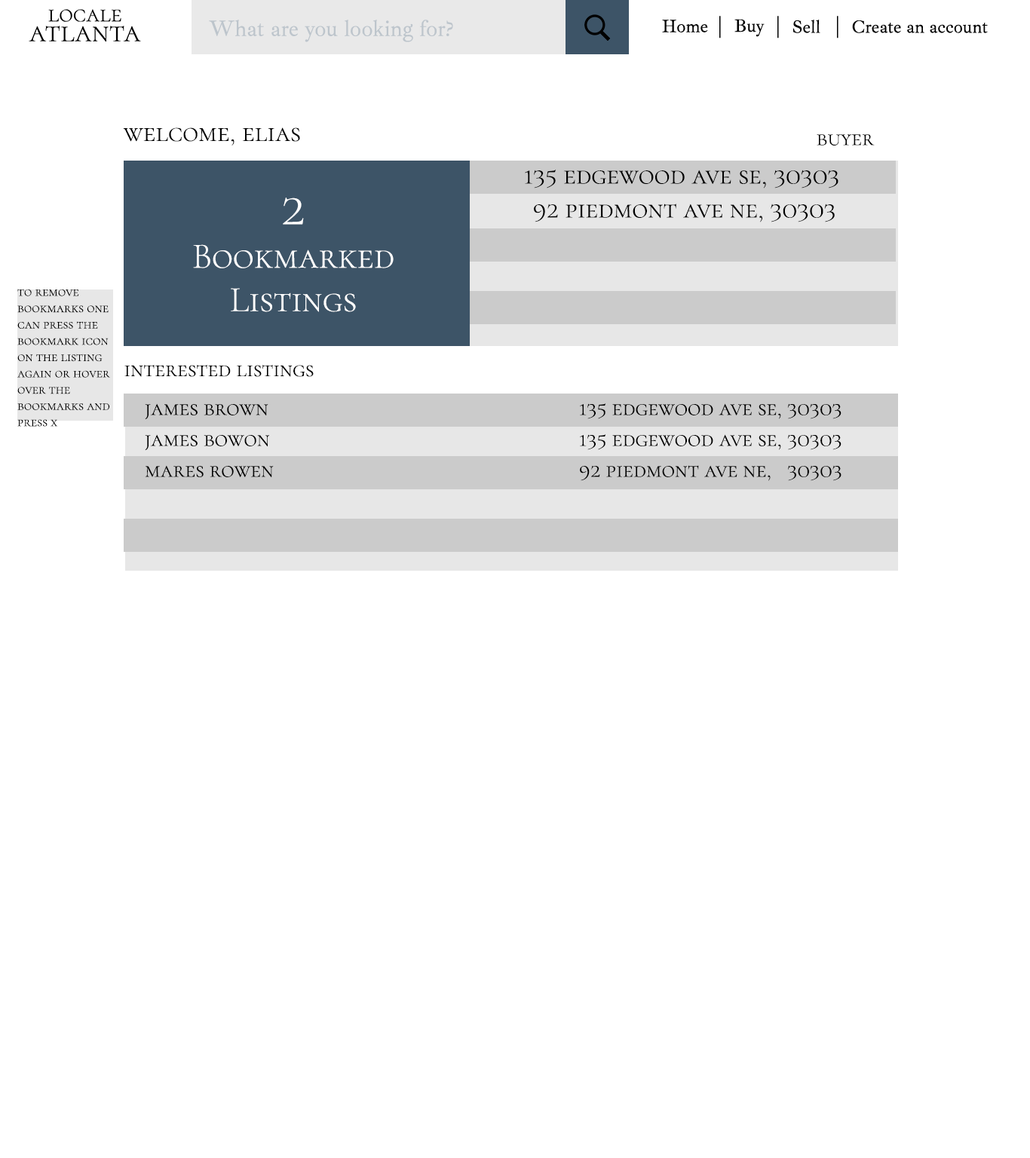
<style>
.page{position:relative;width:1030px;height:1158px;background:#ffffff}
.page>*{position:absolute;margin:0}
.t1{font:27.1px "CormorantSC-Light";color:#000000}
.t2{font:22.6px "CormorantSC-Light";color:#000000}
.t3{font:36.2px "CormorantSC-Light";color:#ffffff}
.t4{font:54.3px "CormorantSC-Light";color:#ffffff}
.t5{font:13.6px "CormorantSC-Light";color:#000000}
</style>
<div class="page">
<p class="t1" style="left:123px;top:127px;width:177px;height:18px">welcome, elias</p>
<p class="t2" style="left:816px;top:134px;width:58px;height:11px">buyer</p>
<p class="t1" style="left:525px;top:170px;width:313px;height:18px">135 edgewood ave se, 30303</p>
<p class="t3" style="left:193px;top:198px;width:201px;height:114px;text-align:center"><span class="t4">2<br></span>Bookmarked<br>Listings</p>
<p class="t1" style="left:534px;top:204px;width:301px;height:18px">92 piedmont ave ne, 30303</p>
<p class="t5" style="left:17px;top:289px;width:93px;height:138px">to remove bookmarks one can press the bookmark icon on the listing again or hover over the bookmarks and press x</p>
<p class="t2" style="left:124px;top:365px;width:190px;height:12px">interested listings</p>
<p class="t2" style="left:145px;top:403px;width:696px;height:16px">james brown             135 edgewood ave se, 30303</p>
<p class="t2" style="left:145px;top:434px;width:696px;height:16px">james bowon             135 edgewood ave se, 30303</p>
<p class="t2" style="left:145px;top:465px;width:696px;height:16px">mares rowen             92 piedmont ave ne,   30303</p>
</div>
